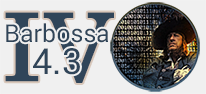
<style>
.page{position:relative;width:206px;height:94px;background:#f0f0f0}
.page>*{position:absolute;margin:0}
.t1{font:91.2px "NimrodMT";color:#304559;font-weight:bold}
.t2{font:24.9px/32px "Roboto-Regular";color:#304559}
.t3{font:36px/32px "Roboto-Regular";color:#304559}
</style>
<div class="page">
<p class="t1" style="left:5px;top:12px;width:109px;height:71px">IV</p>
<p class="t2" style="left:6px;top:23px;width:102px;height:52px;text-align:center">Barbossa<br><span class="t3">4.3</span></p>
</div>
